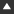
<style>
.page{position:relative;width:14px;height:14px;background:#333333}
.page>*{position:absolute;margin:0}
.t1{font:9px "Seoul-Headline";color:#ffffff}
</style>
<div class="page">
<p class="t1" style="left:3px;top:3px;width:8px;height:7px">▲</p>
</div>
